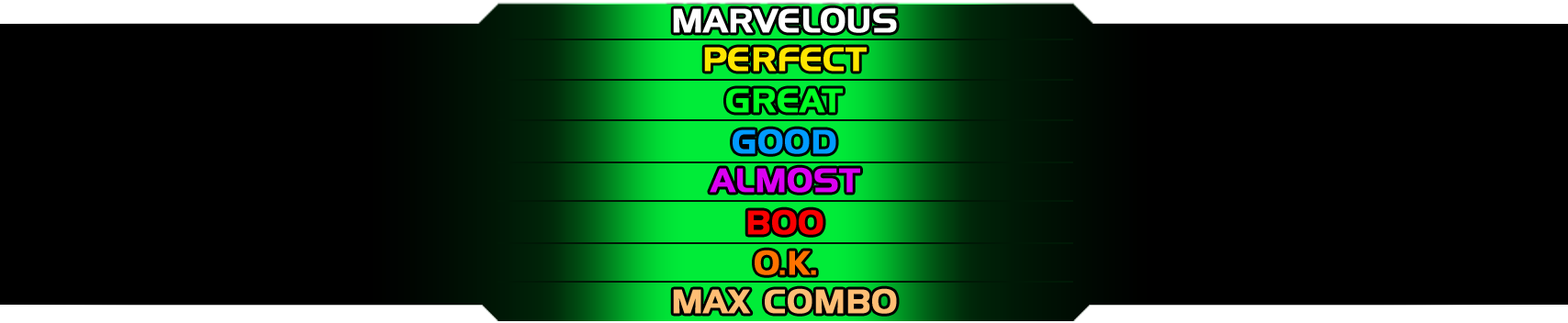
<style>
.page{position:relative;width:1568px;height:323px;background:#000000}
.page>*{position:absolute;margin:0}
.t1{font:32.6px "HandelGothicBT-Regular";letter-spacing:0.01em;color:#ffffff;font-weight:bold}
.t2{font:32.6px "HandelGothicBT-Regular";letter-spacing:0.01em;color:#ffe600;font-weight:bold}
.t3{font:32.6px "HandelGothicBT-Regular";letter-spacing:0.01em;color:#00ff23;font-weight:bold}
.t4{font:32.6px "HandelGothicBT-Regular";letter-spacing:0.01em;color:#009bff;font-weight:bold}
.t5{font:32.6px "HandelGothicBT-Regular";letter-spacing:0.01em;color:#da00f2;font-weight:bold}
.t6{font:32.6px "HandelGothicBT-Regular";letter-spacing:0.01em;color:#f80000;font-weight:bold}
.t7{font:32.6px "HandelGothicBT-Regular";letter-spacing:0.01em;color:#ff7300;font-weight:bold}
.t8{font:32.6px "HandelGothicBT-Regular";letter-spacing:0.01em;color:#ffbe73;font-weight:bold}
</style>
<div class="page">
<p class="t1" style="left:673px;top:7px;width:224px;height:26px">MARVELOUS</p>
<p class="t2" style="left:704px;top:47px;width:163px;height:25px">PERFECT</p>
<p class="t3" style="left:726px;top:88px;width:117px;height:25px">GREAT</p>
<p class="t4" style="left:733px;top:129px;width:103px;height:25px">GOOD</p>
<p class="t5" style="left:710px;top:167px;width:150px;height:26px">ALMOST</p>
<p class="t6" style="left:747px;top:209px;width:76px;height:26px">BOO</p>
<p class="t7" style="left:755px;top:250px;width:61px;height:25px">O.K.</p>
<p class="t8" style="left:673px;top:288px;width:224px;height:26px">MAX COMBO</p>
</div>
